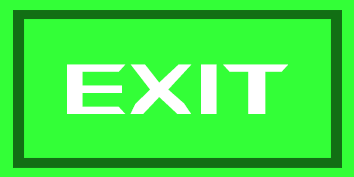
<style>
.page{position:relative;width:354px;height:177px;background:#33ff37}
.page>*{position:absolute;margin:0}
.t1{font:70.8px "AniMeMatrix-MB_EN";color:#ffffff;scale:1.05 1}
</style>
<div class="page">
<p class="t1" style="left:67px;top:64px;width:221px;height:50px">Exit</p>
</div>
